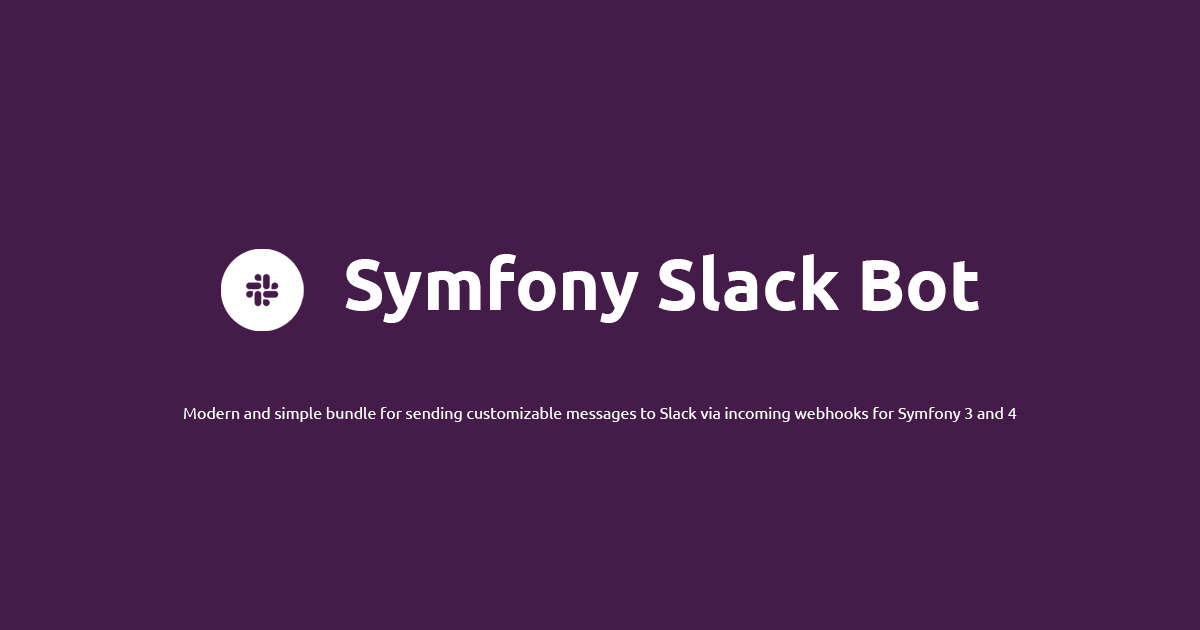
<style>
.page{position:relative;width:1200px;height:630px;background:#441b49}
.page>*{position:absolute;margin:0}
.t1{font:72px "Ubuntu-Bold";color:#ffffff}
.t2{font:16px "Ubuntu";color:#ffffff}
</style>
<div class="page">
<p class="t1" style="left:345px;top:254px;width:634px;height:69px">Symfony Slack Bot</p>
<p class="t2" style="left:184px;top:407px;width:833px;height:15px">Modern and simple bundle for sending customizable messages to Slack via incoming webhooks for Symfony 3 and 4</p>
</div>
